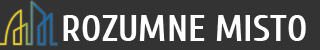
<style>
.page{position:relative;width:320px;height:50px;background:#333333}
.page>*{position:absolute;margin:0}
.t1{font:37.3px "Cuprum-Bold";color:#fffefe}
</style>
<div class="page">
<p class="t1" style="left:63px;top:15px;width:243px;height:26px">ROZUMNE MISTO</p>
</div>
